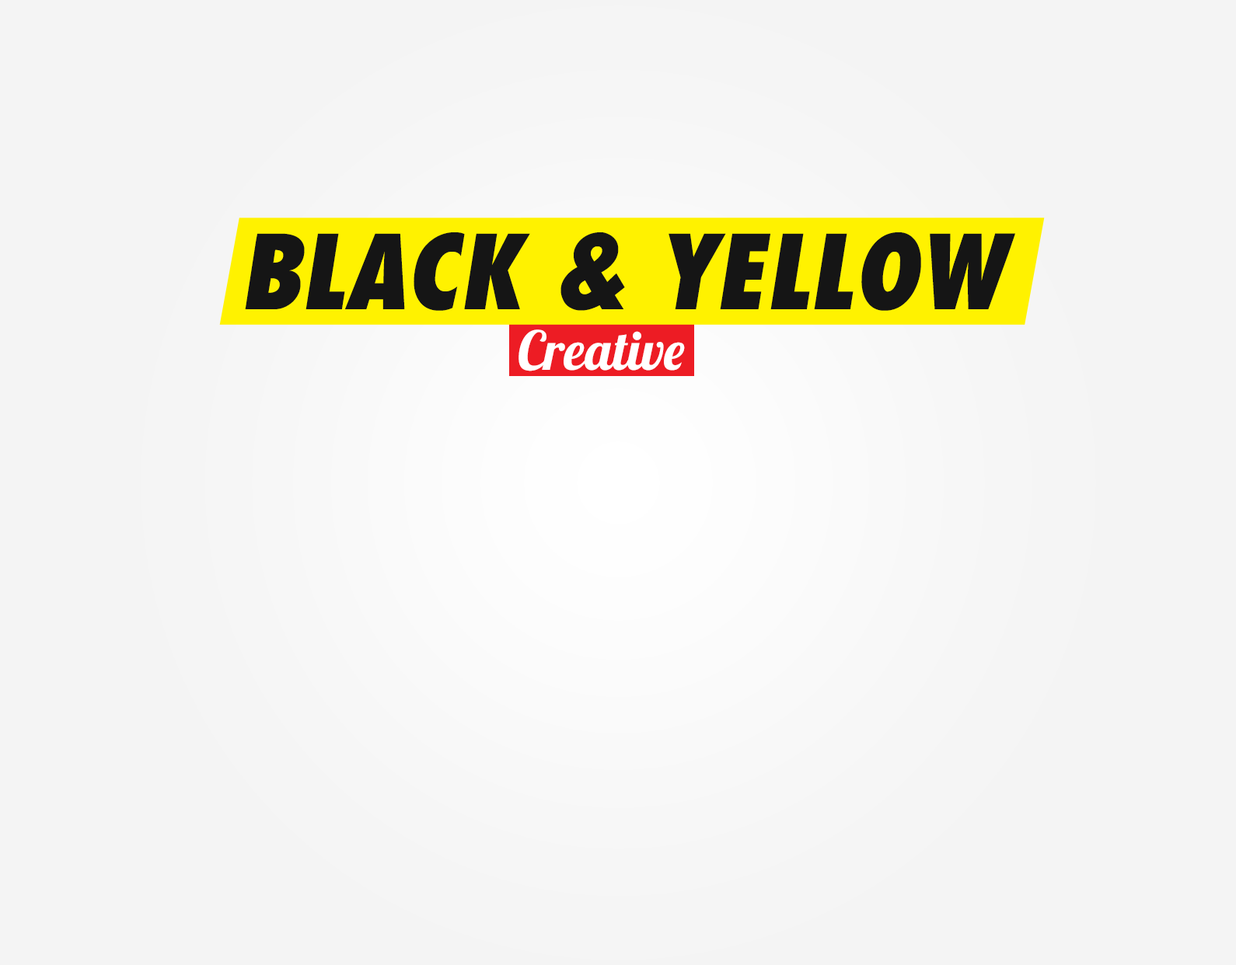
<style>
.page{position:relative;width:1236px;height:965px;background:#f4f4f4}
.page>*{position:absolute;margin:0}
.t1{font:100.2px "FuturaExtraBoldIta";color:#151515}
.t2{font:53.7px "Lobster1.4";color:#ffffff}
</style>
<div class="page">
<p class="t1" style="left:245px;top:232px;width:770px;height:79px">BLACK &amp; YELLOW</p>
<p class="t2" style="left:518px;top:329px;width:167px;height:42px">Creative</p>
</div>
